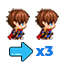
<style>
.page{position:relative;width:64px;height:64px;background:#ffffff}
.page>*{position:absolute;margin:0}
.t1{font:14px "Montserrat-Black";color:#147ce7}
</style>
<div class="page">
<p class="t1" style="left:35px;top:46px;width:18px;height:10px">x3</p>
</div>
